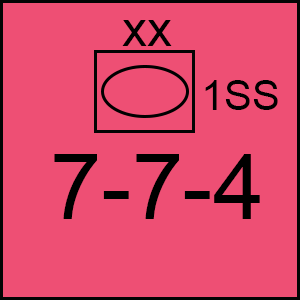
<style>
.page{position:relative;width:300px;height:300px;background:#ee4f74}
.page>*{position:absolute;margin:0}
.t1{font:50px "ArialMT";color:#000000}
.t2{font:41.7px "ArialMT";color:#000000}
.t3{font:91.7px "ArialMT";color:#000000}
</style>
<div class="page">
<p class="t1" style="left:122px;top:20px;width:50px;height:26px">xx</p>
<p class="t2" style="left:205px;top:80px;width:73px;height:30px">1SS</p>
<p class="t3" style="left:54px;top:154px;width:206px;height:65px">7-7-4</p>
</div>
